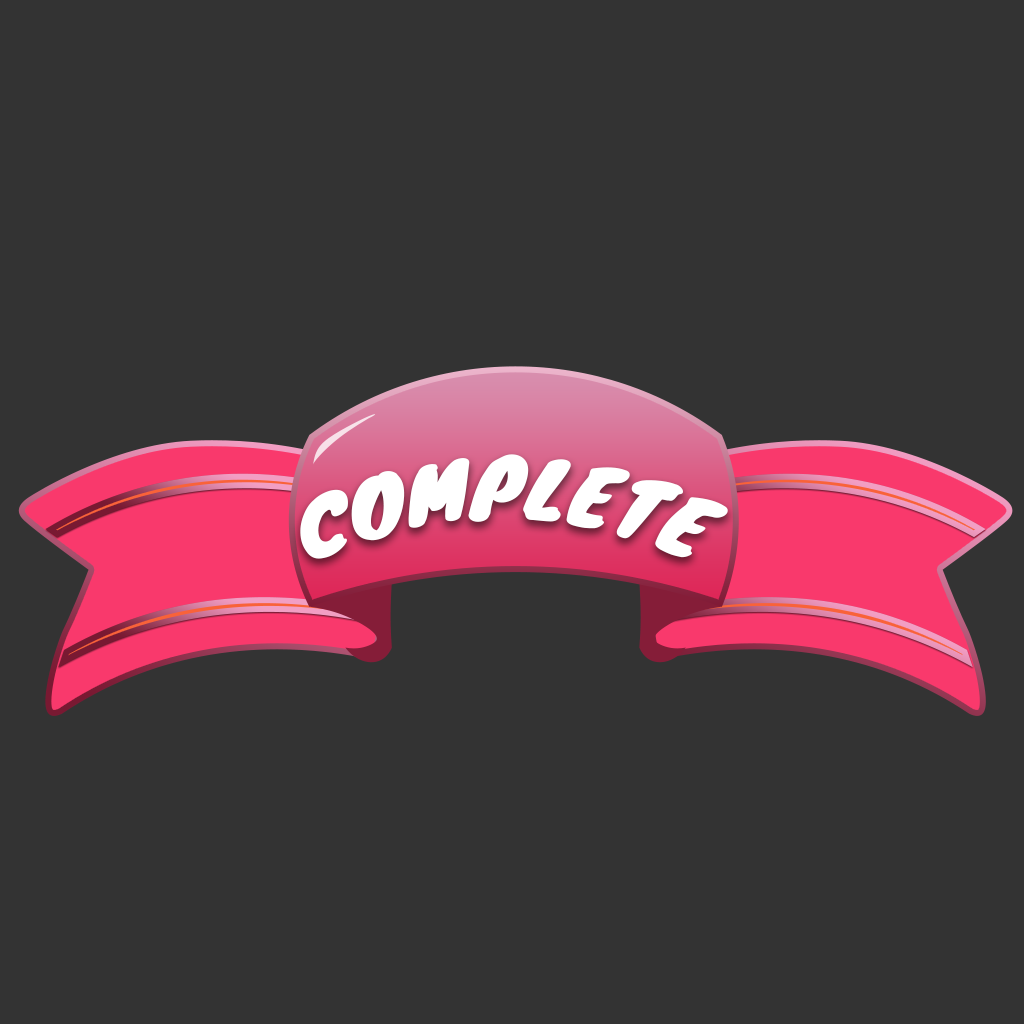
<style>
.page{position:relative;width:1024px;height:1024px;background:#333333}
.page>*{position:absolute;margin:0}
.t1{font:75.1px "Knewave-Regular";letter-spacing:0.04em;color:#ffffff}
</style>
<div class="page">
<p class="t1" style="left:300px;top:454px;width:428px;height:105px">COMPLETE</p>
</div>
